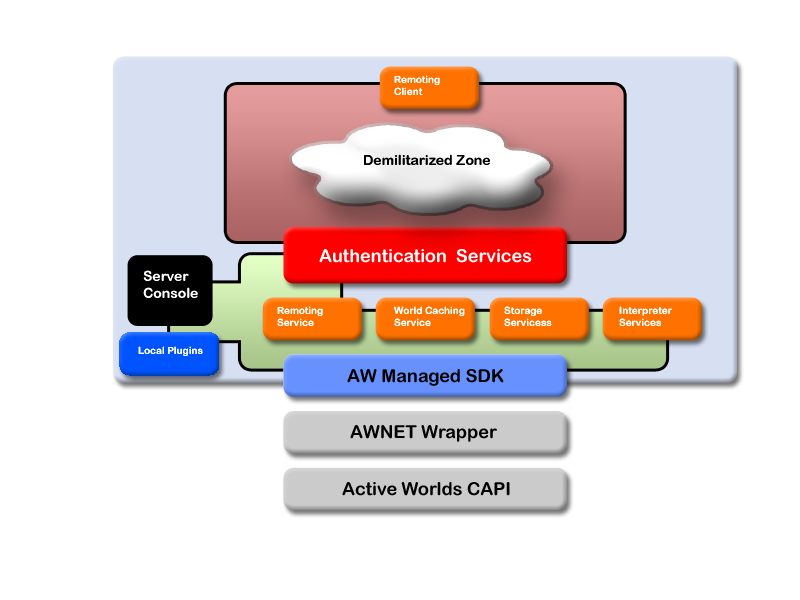
<style>
.page{position:relative;width:800px;height:600px;background:#ffffff}
.page>*{position:absolute;margin:0}
.t1{font:10px "ArialRoundedMTBold";color:#ffffff}
.t2{font:14px "ArialRoundedMTBold";color:#000000}
.t3{font:18px "ArialRoundedMTBold";color:#ffffff}
.t4{font:14px "ArialRoundedMTBold";color:#ffffff}
.t5{font:18px "ArialRoundedMTBold";color:#000000}
</style>
<div class="page">
<p class="t1" style="left:394px;top:75px;width:46px;height:20px">Remoting<br>Client</p>
<p class="t2" style="left:364px;top:154px;width:126px;height:11px">Demilitarized Zone</p>
<p class="t3" style="left:319px;top:249px;width:213px;height:14px">Authentication  Services</p>
<p class="t4" style="left:143px;top:270px;width:55px;height:28px">Server <br>Console</p>
<p class="t1" style="left:277px;top:306px;width:46px;height:20px">Remoting<br>Service</p>
<p class="t1" style="left:394px;top:306px;width:71px;height:20px">World Caching<br>Service</p>
<p class="t1" style="left:504px;top:306px;width:48px;height:20px">Storage<br>Servicess</p>
<p class="t1" style="left:619px;top:306px;width:53px;height:20px">Interpreter<br>Services</p>
<p class="t1" style="left:138px;top:346px;width:65px;height:10px">Local Plugins</p>
<p class="t5" style="left:347px;top:369px;width:157px;height:17px">AW Managed SDK</p>
<p class="t5" style="left:350px;top:425px;width:147px;height:17px">AWNET Wrapper</p>
<p class="t5" style="left:342px;top:482px;width:168px;height:14px">Active Worlds CAPI</p>
</div>
